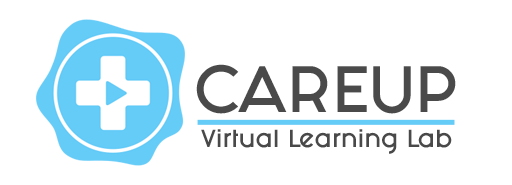
<style>
.page{position:relative;width:512px;height:185px;background:#ffffff}
.page>*{position:absolute;margin:0}
.t1{font:55.6px "FashionFetish";color:#4a4a4a}
.t2{font:20.9px "FashionFetish";color:#494949}
</style>
<div class="page">
<p class="t1" style="left:196px;top:64px;width:260px;height:50px">CAREUP</p>
<p class="t2" style="left:201px;top:129px;width:251px;height:25px">Virtual Learning Lab</p>
</div>
